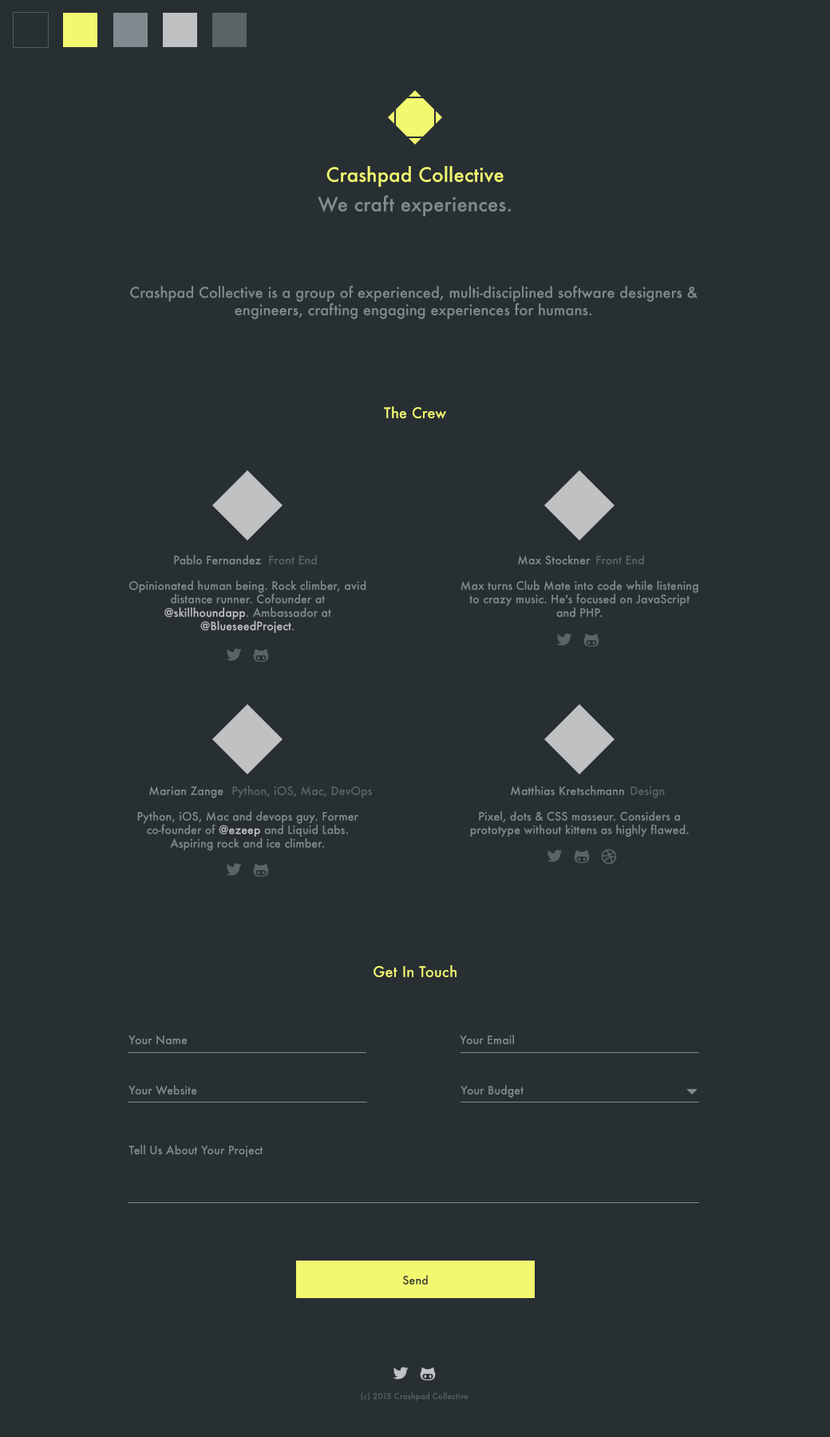
<style>
.page{position:relative;width:830px;height:1437px;background:#282f33}
.page>*{position:absolute;margin:0}
.t1{font:19.2px "Futura-Medium";letter-spacing:0.01em;color:#f3f871}
.t2{font:19.2px "Futura-Medium";letter-spacing:0.01em;color:#828a8f}
.t3{font:14.4px "Futura-Medium";letter-spacing:0.01em;color:#828a8f}
.t4{font:14.4px "Futura-Medium";letter-spacing:0.01em;color:#f3f871}
.t5{font:11.2px "Futura-Medium";letter-spacing:0.01em;color:#828a8f}
.t6{font:11.2px "Futura-Medium";letter-spacing:0.01em;color:#5c6367}
.t7{font:11.2px "Futura-Medium";letter-spacing:0.01em;color:#bfc1c2}
.t8{font:11.2px "Futura-Medium";letter-spacing:0.01em;color:#282f33}
.t9{font:8px "Futura-Medium";letter-spacing:0.01em;color:#5c6367}
</style>
<div class="page">
<p class="t1" style="left:326px;top:166px;width:178px;height:21px">Crashpad Collective</p>
<p class="t2" style="left:318px;top:195px;width:193px;height:21px">We craft experiences.</p>
<p class="t3" style="left:130px;top:286px;width:568px;height:33px;text-align:center">Crashpad Collective is a group of experienced, multi-disciplined software designers &amp; engineers, crafting engaging experiences for humans.</p>
<p class="t4" style="left:384px;top:406px;width:62px;height:13px">The Crew</p>
<p class="t5" style="left:174px;top:555px;width:87px;height:9px">Pablo Fernandez</p>
<p class="t6" style="left:269px;top:555px;width:48px;height:9px">Front End</p>
<p class="t5" style="left:518px;top:555px;width:73px;height:10px">Max Stockner</p>
<p class="t6" style="left:596px;top:555px;width:48px;height:9px">Front End</p>
<p class="t5" style="left:129px;top:580px;width:237px;height:53px;text-align:center">Opinionated human being. Rock climber, avid distance runner. Cofounder at <span class="t7">@skillhoundapp</span>. Ambassador at <span class="t7">@BlueseedProject</span>.</p>
<p class="t5" style="left:461px;top:580px;width:237px;height:37px;text-align:center">Max turns Club Mate into code while listening to crazy music. He's focused on JavaScript and PHP.</p>
<p class="t5" style="left:149px;top:785px;width:74px;height:13px">Marian Zange</p>
<p class="t6" style="left:232px;top:785px;width:140px;height:13px">Python, iOS, Mac, DevOps</p>
<p class="t5" style="left:511px;top:785px;width:113px;height:11px">Matthias Kretschmann</p>
<p class="t6" style="left:631px;top:786px;width:34px;height:12px">Design</p>
<p class="t5" style="left:137px;top:811px;width:221px;height:40px;text-align:center">Python, iOS, Mac and devops guy. Former co-founder of <span class="t7">@ezeep</span> and Liquid Labs. Aspiring rock and ice climber.</p>
<p class="t5" style="left:470px;top:811px;width:219px;height:26px;text-align:center">Pixel, dots &amp; CSS masseur. Considers a prototype without kittens as highly flawed.</p>
<p class="t4" style="left:374px;top:965px;width:83px;height:12px">Get In Touch</p>
<p class="t5" style="left:128px;top:1034px;width:59px;height:11px">Your Name</p>
<p class="t5" style="left:460px;top:1034px;width:54px;height:10px">Your Email</p>
<p class="t5" style="left:128px;top:1085px;width:69px;height:10px">Your Website</p>
<p class="t5" style="left:461px;top:1085px;width:63px;height:12px">Your Budget</p>
<p class="t5" style="left:128px;top:1144px;width:135px;height:13px">Tell Us About Your Project</p>
<p class="t8" style="left:403px;top:1275px;width:25px;height:9px">Send</p>
<p class="t9" style="left:361px;top:1392px;width:107px;height:9px">(c) 2015 Crashpad Collective</p>
</div>
